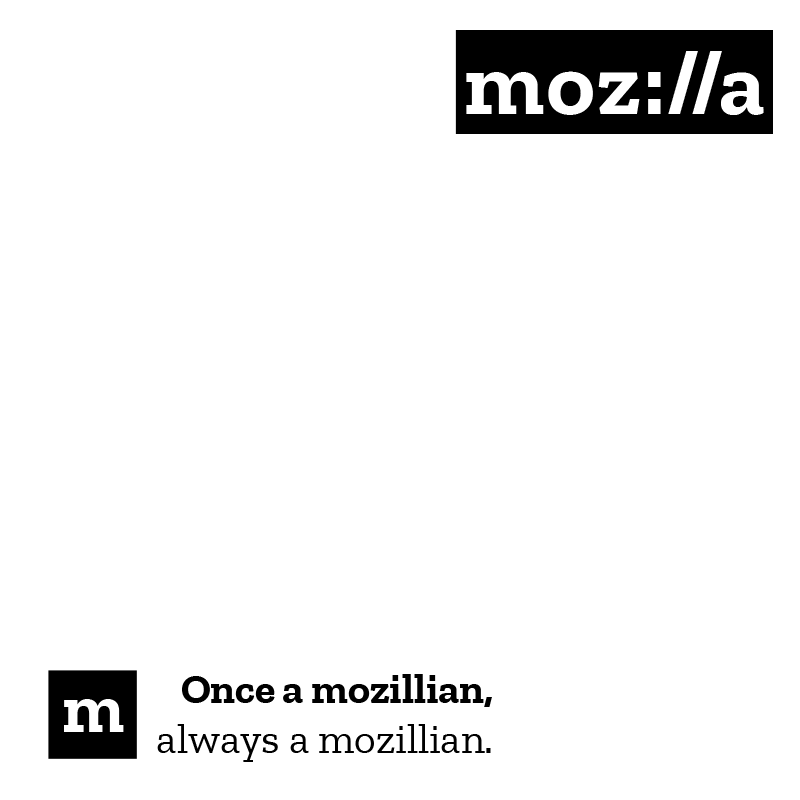
<style>
.page{position:relative;width:800px;height:800px;background:#ffffff}
.page>*{position:absolute;margin:0}
.t1{font:91.7px "ZillaSlabHighlight-Bold";color:#000000}
.t2{font:41.7px "ZillaSlabRegular";color:#000000}
.t3{font:41.7px "ZillaSlab-Bold";color:#000000}
.t4{font:70.8px "ZillaSlab-Bold";color:#ffffff}
</style>
<div class="page">
<p class="t1" style="left:455px;top:30px;width:318px;height:104px">mozilla</p>
<p class="t2" style="left:157px;top:674px;width:335px;height:88px;text-align:right"><span class="t3">Once a mozillian,</span><br>always a mozillian.</p>
<p class="t4" style="left:64px;top:699px;width:60px;height:33px">m</p>
</div>
